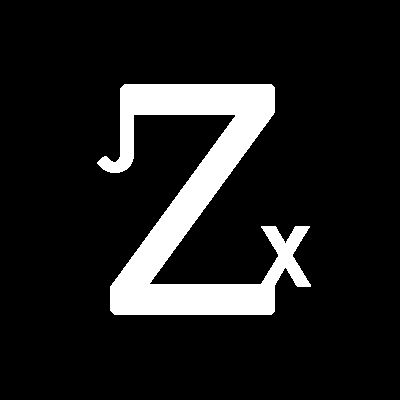
<style>
.page{position:relative;width:400px;height:400px;background:#000000}
.page>*{position:absolute;margin:0}
.t1{font:300px "NewsGothicMT";letter-spacing:0.08em;color:#ffffff;font-weight:bold}
.t2{font:80px "NewsGothicMT-Bold";letter-spacing:0.08em;color:#ffffff;font-weight:bold}
</style>
<div class="page">
<p class="t1" style="left:110px;top:84px;width:165px;height:231px">Z</p>
<p class="t2" style="left:97px;top:111px;width:37px;height:62px">J</p>
<p class="t2" style="left:260px;top:226px;width:51px;height:61px">X</p>
</div>
